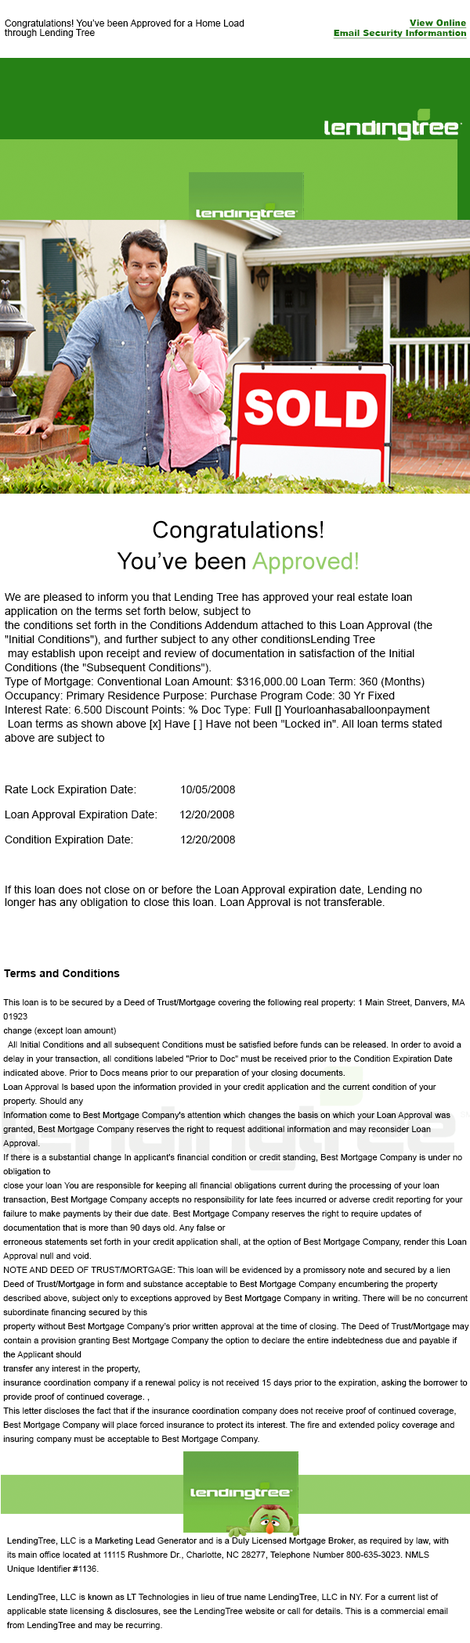
<style>
.page{position:relative;width:470px;height:1643px;background:#ffffff}
.page>*{position:absolute;margin:0}
.t1{font:9.4px/9.4px "ArialMT";letter-spacing:0.005em;color:#000000}
.t2{font:8.6px "Arial-Black";letter-spacing:0.005em;color:#157305;text-decoration:underline}
.t3{font:8.6px "Arial-Black";color:#157305;text-decoration:underline}
.t4{font:23.5px/7.8px "ArialMT";letter-spacing:0.005em;color:#000000}
.t5{font:23.5px/7.8px "ArialMT";letter-spacing:0.005em;color:#95cd69}
.t6{font:11px/14.1px "ArialMT";letter-spacing:0.005em;color:#000000}
.t7{font:11px/12.5px "ArialMT";letter-spacing:0.005em;color:#000000}
.t8{font:11px "Arial-BoldMT";letter-spacing:0.005em;color:#000000}
.t9{font:8.6px/14.1px "ArialMT";letter-spacing:0.005em;color:#000000}
</style>
<div class="page">
<p class="t1" style="left:5px;top:20px;width:239px;height:18px">Congratulations! You’ve been Approved for a Home Load <br>through Lending Tree</p>
<p class="t2" style="left:333px;top:30px;width:133px;height:9px">Email Security Informantion</p>
<p class="t3" style="left:409px;top:19px;width:57px;height:9px">View Online</p>
<p class="t4" style="left:117px;top:520px;width:241px;height:54px;text-align:center">Congratulations!<br><br><br><br>You’ve been <span class="t5">Approved!</span></p>
<p class="t6" style="left:5px;top:592px;width:436px;height:317px">We are pleased to inform you that Lending Tree has approved your real estate loan application on the terms set forth below, subject to<br>the conditions set forth in the Conditions Addendum attached to this Loan Approval (the "Initial Conditions"), and further subject to any other conditionsLending Tree<br> may establish upon receipt and review of documentation in satisfaction of the Initial Conditions (the "Subsequent Conditions").<br>Type of Mortgage: Conventional Loan Amount: $316,000.00 Loan Term: 360 (Months) Occupancy: Primary Residence Purpose: Purchase Program Code: 30 Yr Fixed<br>Interest Rate: 6.500 Discount Points: % Doc Type: Full [] Yourloanhasaballoonpayment<br> Loan terms as shown above [x] Have [ ] Have not been "Locked in". All loan terms stated above are subject to<br> <br><span class="t7"> <br>  <br>Rate Lock Expiration Date:              10/05/2008<br><br>Loan Approval Expiration Date:       12/20/2008<br><br>Condition Expiration Date:               12/20/2008<br>           <br>  <br><br>If this loan does not close on or before the Loan Approval expiration date, Lending no longer has any obligation to close this loan. Loan Approval is not transferable.</span></p>
<p class="t8" style="left:4px;top:970px;width:116px;height:7px">Terms and Conditions</p>
<p class="t9" style="left:3px;top:999px;width:466px;height:445px">This loan is to be secured by a Deed of Trust/Mortgage covering the following real property: 1 Main Street, Danvers, MA 01923<br>change (except loan amount)<br>  All Initial Conditions and all subsequent Conditions must be satisfied before funds can be released. In order to avoid a delay in your transaction, all conditions labeled "Prior to Doc" must be received prior to the Condition Expiration Date indicated above. Prior to Docs means prior to our preparation of your closing documents.<br>Loan Approval Is based upon the information provided in your credit application and the current condition of your property. Should any<br>Information come to Best Mortgage Company's attention which changes the basis on which your Loan Approval was granted, Best Mortgage Company reserves the right to request additional information and may reconsider Loan Approval.<br>If there is a substantial change In applicant's financial condition or credit standing, Best Mortgage Company is under no obligation to<br>close your loan You are responsible for keeping all financial obligations current during the processing of your loan transaction, Best Mortgage Company accepts no responsibility for late fees incurred or adverse credit reporting for your failure to make payments by their due date. Best Mortgage Company reserves the right to require updates of documentation that is more than 90 days old. Any false or<br>erroneous statements set forth in your credit application shall, at the option of Best Mortgage Company, render this Loan Approval null and void.<br>NOTE AND DEED OF TRUST/MORTGAGE: This loan will be evidenced by a promissory note and secured by a lien Deed of Trust/Mortgage in form and substance acceptable to Best Mortgage Company encumbering the property described above, subject only to exceptions approved by Best Mortgage Company in writing. There will be no concurrent subordinate financing secured by this<br>property without Best Mortgage Company’s prior written approval at the time of closing. The Deed of Trust/Mortgage may contain a provision granting Best Mortgage Company the option to declare the entire indebtedness due and payable if the Applicant should<br>transfer any interest in the property,<br>insurance coordination company if a renewal policy is not received 15 days prior to the expiration, asking the borrower to provide proof of continued coverage. ,<br>This letter discloses the fact that if the insurance coordination company does not receive proof of continued coverage, Best Mortgage Company will place forced insurance to protect its interest. The fire and extended policy coverage and insuring company must be acceptable to Best Mortgage Company.</p>
<p class="t9" style="left:7px;top:1538px;width:441px;height:92px"><span class="t6"> <br></span>LendingTree, LLC is a Marketing Lead Generator and is a Duly Licensed Mortgage Broker, as required by law, with its main office located at 11115 Rushmore Dr., Charlotte, NC 28277, Telephone Number 800-635-3023. NMLS Unique Identifier #1136.<br> <br>LendingTree, LLC is known as LT Technologies in lieu of true name LendingTree, LLC in NY. For a current list of applicable state licensing &amp; disclosures, see the LendingTree website or call for details. This is a commercial email from LendingTree and may be recurring.<br><span class="t6"> <br>LendingTree, LLC: Unsubscribe | Privacy Policy | Terms of Use | Disclosures and Licenses</span></p>
</div>
